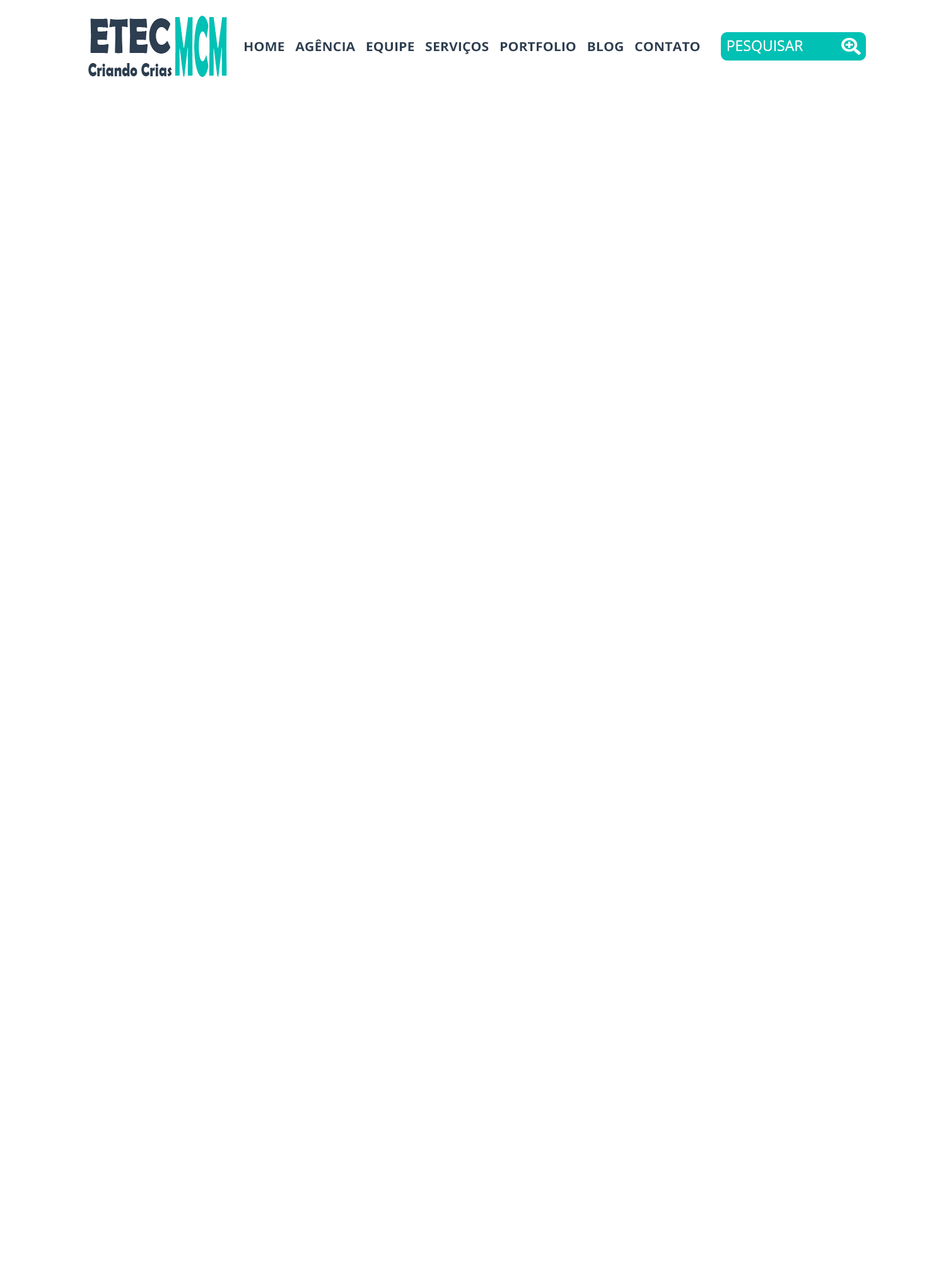
<style>
.page{position:relative;width:946px;height:1261px;background:#ffffff}
.page>*{position:absolute;margin:0}
.t1{font:85.5px "BerlinSansFBDemi-Bold";color:#01c1b5;scale:0.28 1}
.t2{font:49.9px "BerlinSansFBDemi-Bold";color:#2c3e50;scale:0.72 1}
.t3{font:12.4px "OpenSans-Bold";color:#2c3e50;scale:1.08 1}
.t4{font:14.5px "OpenSans";color:#ffffff}
.t5{font:19.5px "BerlinSansFBDemi-Bold";color:#2c3e50;scale:0.72 1}
</style>
<div class="page">
<p class="t1" style="left:175px;top:16px;width:52px;height:61px">MCM</p>
<p class="t2" style="left:90px;top:18px;width:80px;height:36px">ETEC</p>
<p class="t3" style="left:245px;top:39px;width:455px;height:15px">HOME   AGÊNCIA   EQUIPE   SERVIÇOS   PORTFOLIO   BLOG   CONTATO</p>
<p class="t4" style="left:727px;top:40px;width:76px;height:14px">PESQUISAR</p>
<p class="t5" style="left:88px;top:63px;width:84px;height:13px">Criando Crias</p>
</div>
